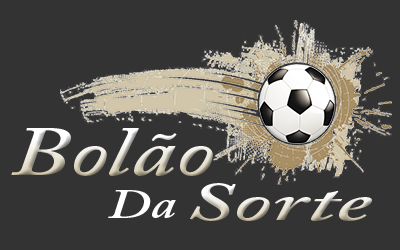
<style>
.page{position:relative;width:400px;height:250px;background:#333333}
.page>*{position:absolute;margin:0}
.t1{font:70.6px "ACaslonPro-SemiboldItalic";scale:1.32 1}
.t2{font:53.8px "ACaslonPro-SemiboldItalic";scale:1.76 1}
.t3{font:40.8px "ACaslonPro-SemiboldItalic";color:#ffffff;scale:1.32 1}
</style>
<div class="page">
<p class="t1" style="left:11px;top:128px;width:202px;height:48px">Bolão</p>
<p class="t2" style="left:190px;top:183px;width:182px;height:38px">Sorte</p>
<p class="t3" style="left:108px;top:190px;width:68px;height:28px">Da</p>
</div>
